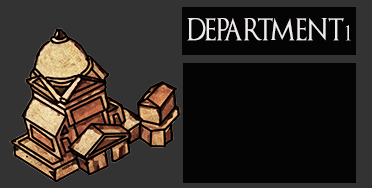
<style>
.page{position:relative;width:372px;height:188px;background:#040404}
.page>*{position:absolute;margin:0}
.t1{font:22.3px "GameofThrones";color:#f0ecec;scale:0.86 1}
.t2{font:22.3px "TimesNewRomanPSMT";color:#f0ecec;scale:0.86 1}
</style>
<div class="page">
<p class="t1" style="left:187px;top:18px;width:164px;height:23px">Department<span class="t2">1</span></p>
</div>
